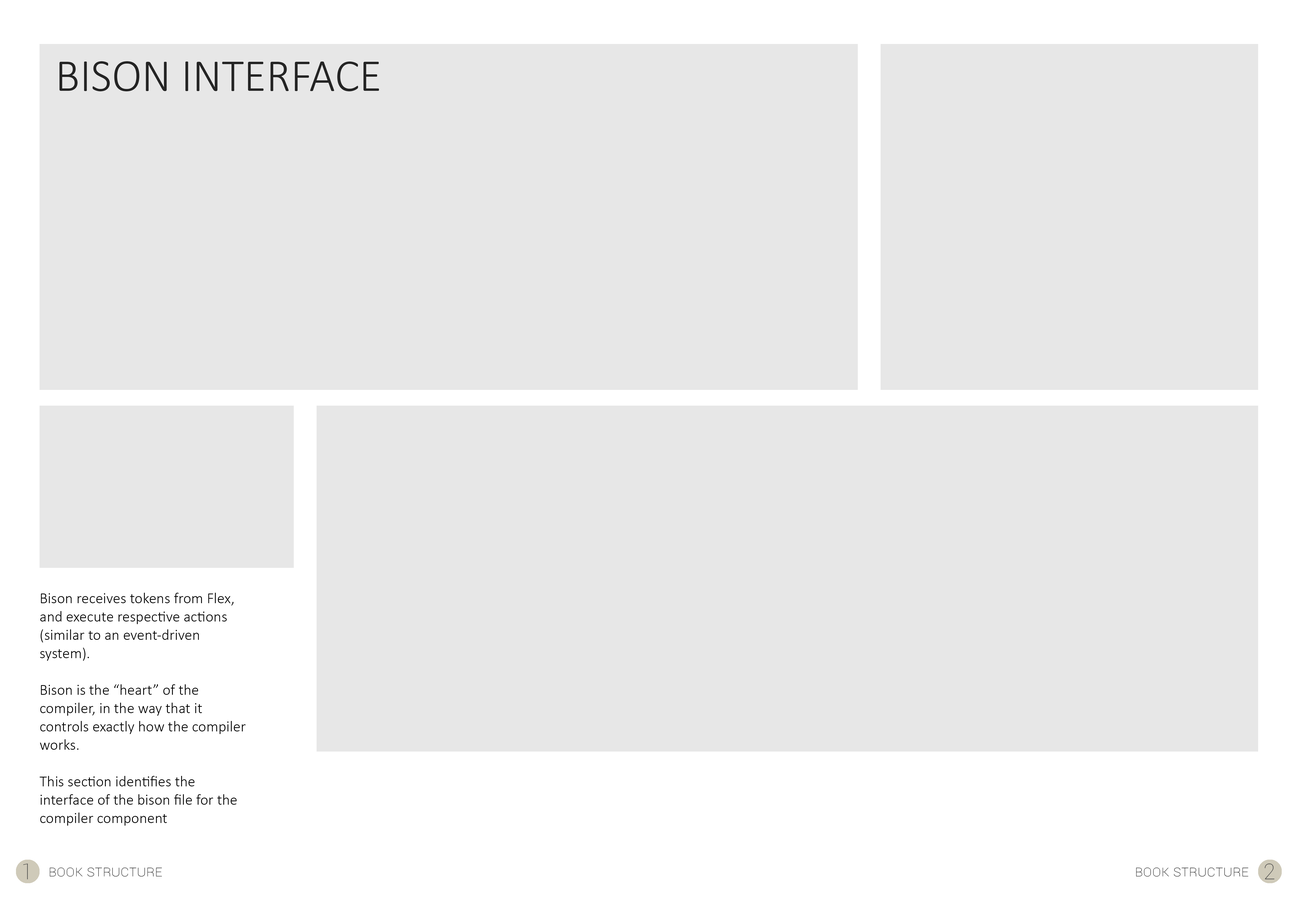
<style>
.page{position:relative;width:1299px;height:918px;background:#e7e7e7}
.page>*{position:absolute;margin:0}
.t1{font:45.8px "Calibri-Light";color:#242424;text-transform:uppercase}
.t2{font:15.3px "Calibri-Light";color:#000000}
.t3{font:21.8px "Roboto-Thin";color:#484848}
.t4{font:15.3px "Roboto-Thin";color:#000000;font-variant:small-caps}
</style>
<div class="page">
<p class="t1" style="left:59px;top:61px;width:320px;height:30px">bison interface</p>
<p class="t2" style="left:40px;top:593px;width:206px;height:233px">Bison receives tokens from Flex, and execute respective actions (similar to an event-driven system).<br><br>Bison is the “heart” of the compiler, in the way that it controls exactly how the compiler works.<br><br>This section identifies the interface of the bison file for the compiler component</p>
<p class="t3" style="left:23px;top:864px;width:5px;height:16px">1</p>
<p class="t4" style="left:50px;top:868px;width:112px;height:9px">Book structure</p>
<p class="t4" style="left:1136px;top:868px;width:112px;height:9px">Book structure</p>
<p class="t3" style="left:1264px;top:864px;width:10px;height:16px">2</p>
</div>
